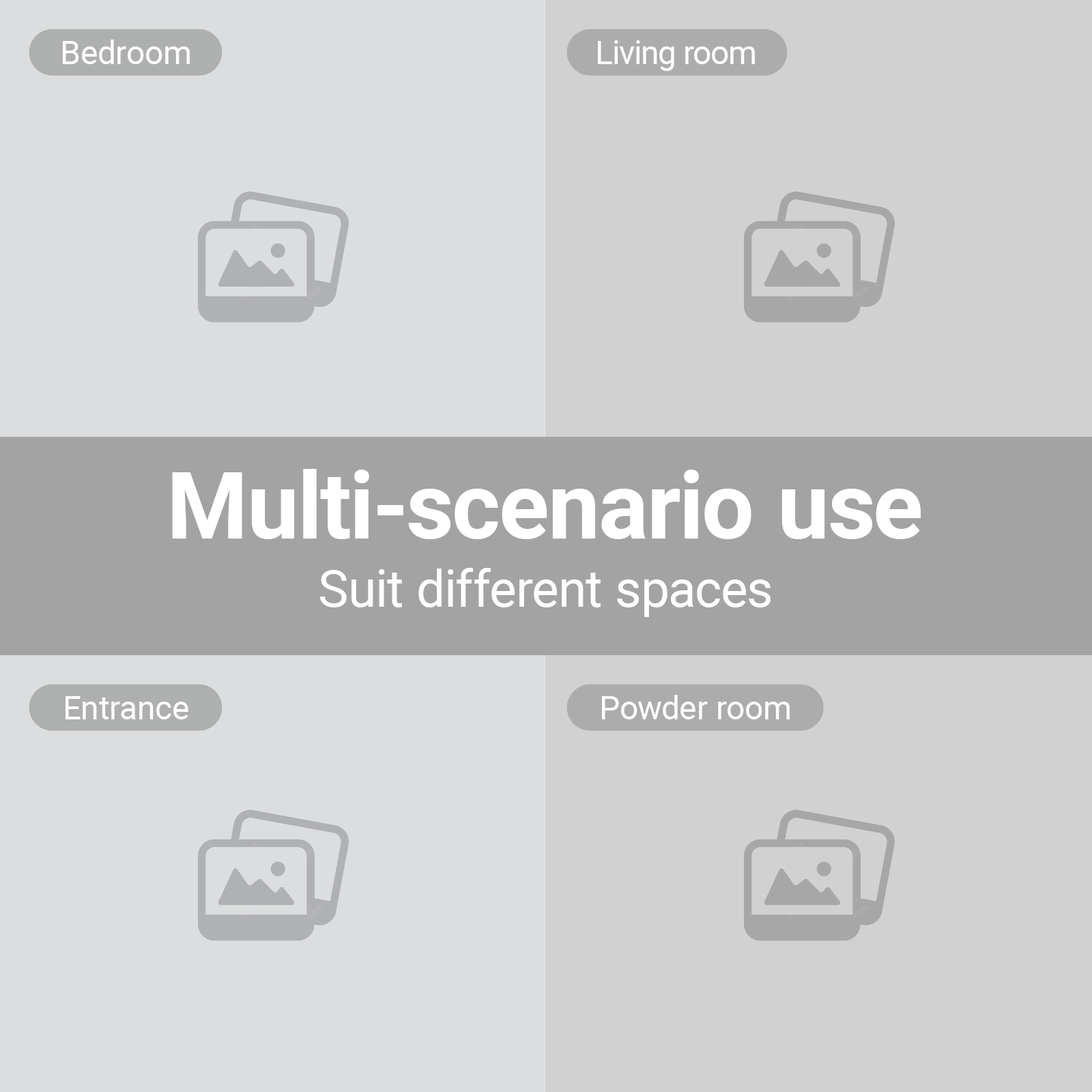
<style>
.page{position:relative;width:1092px;height:1092px;background:#dcdddf}
.page>*{position:absolute;margin:0}
.t1{font:32.8px "Roboto-Regular";color:#ffffff}
.t2{font:32.8px "Roboto-Regular";letter-spacing:-0.02em;color:#ffffff}
.t3{font:92.8px "Roboto-Bold";color:#ffffff}
.t4{font:51px "Roboto-Regular";color:#ffffff}
</style>
<div class="page">
<p class="t1" style="left:63px;top:40px;width:127px;height:24px">Bedroom</p>
<p class="t2" style="left:598px;top:40px;width:157px;height:31px">Living room</p>
<p class="t3" style="left:172px;top:469px;width:749px;height:70px">Multi-scenario use</p>
<p class="t4" style="left:319px;top:568px;width:452px;height:49px">Suit different spaces</p>
<p class="t1" style="left:66px;top:696px;width:122px;height:23px">Entrance</p>
<p class="t1" style="left:602px;top:695px;width:188px;height:24px">Powder room</p>
</div>
